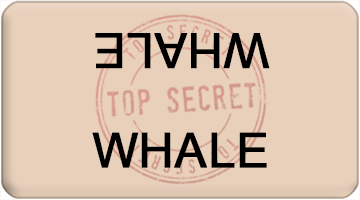
<style>
.page{position:relative;width:360px;height:200px;background:#e8d0bb}
.page>*{position:absolute;margin:0}
.t1{font:48px "ArialMT";color:#000000;font-weight:bold}
</style>
<div class="page">
<p class="t1" style="left:95px;top:33px;width:175px;height:36px;rotate:180deg">WHALE</p>
<p class="t1" style="left:92px;top:132px;width:175px;height:36px">WHALE</p>
</div>
